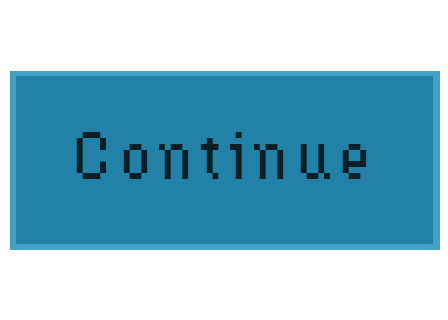
<style>
.page{position:relative;width:448px;height:320px;background:#2181a6}
.page>*{position:absolute;margin:0}
.t1{font:64px "HydrophiliaIced";letter-spacing:0.1em;color:#081f28}
</style>
<div class="page">
<p class="t1" style="left:76px;top:132px;width:291px;height:47px">Continue</p>
</div>
